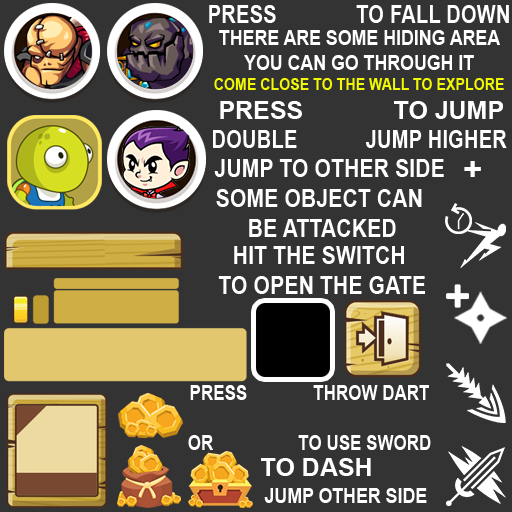
<style>
.page{position:relative;width:512px;height:512px;background:#333333}
.page>*{position:absolute;margin:0}
.t1{font:25px "Arial-BoldMT";color:#ffffff;scale:0.82 1}
.t2{font:20.8px "Arial-BoldMT";color:#ffffff;scale:0.85 1}
.t3{font:16.7px "Arial-BoldMT";color:#f1fa00;scale:0.85 1}
.t4{font:25px "Arial-BoldMT";color:#ffffff}
.t5{font:25px "Arial-BoldMT";color:#ffffff;scale:0.85 1}
.t6{font:33.3px "Arial-BoldMT";color:#ffffff}
.t7{font:20.8px "Arial-BoldMT";color:#ffffff;scale:0.82 1}
</style>
<div class="page">
<p class="t1" style="left:209px;top:5px;width:300px;height:18px">PRESS              TO FALL DOWN</p>
<p class="t2" style="left:214px;top:30px;width:290px;height:60px;text-align:center">THERE ARE SOME HIDING AREA<br>YOU CAN GO THROUGH IT<br><span class="t3">COME CLOSE TO THE WALL TO EXPLORE</span></p>
<p class="t4" style="left:220px;top:101px;width:283px;height:18px">PRESS             TO JUMP</p>
<p class="t1" style="left:213px;top:130px;width:294px;height:18px">DOUBLE            JUMP HIGHER</p>
<p class="t5" style="left:214px;top:159px;width:230px;height:18px">JUMP TO OTHER SIDE</p>
<p class="t6" style="left:464px;top:161px;width:17px;height:16px">+</p>
<p class="t5" style="left:216px;top:189px;width:206px;height:48px;text-align:center">SOME OBJECT CAN <br>BE ATTACKED</p>
<p class="t5" style="left:218px;top:246px;width:207px;height:48px;text-align:center">HIT THE SWITCH <br>TO OPEN THE GATE</p>
<p class="t7" style="left:188px;top:385px;width:243px;height:65px;text-align:center">PRESS              THROW DART<br><br>OR                  TO USE SWORD</p>
<p class="t4" style="left:261px;top:458px;width:110px;height:18px">TO DASH</p>
<p class="t2" style="left:264px;top:488px;width:163px;height:15px">JUMP OTHER SIDE</p>
</div>
